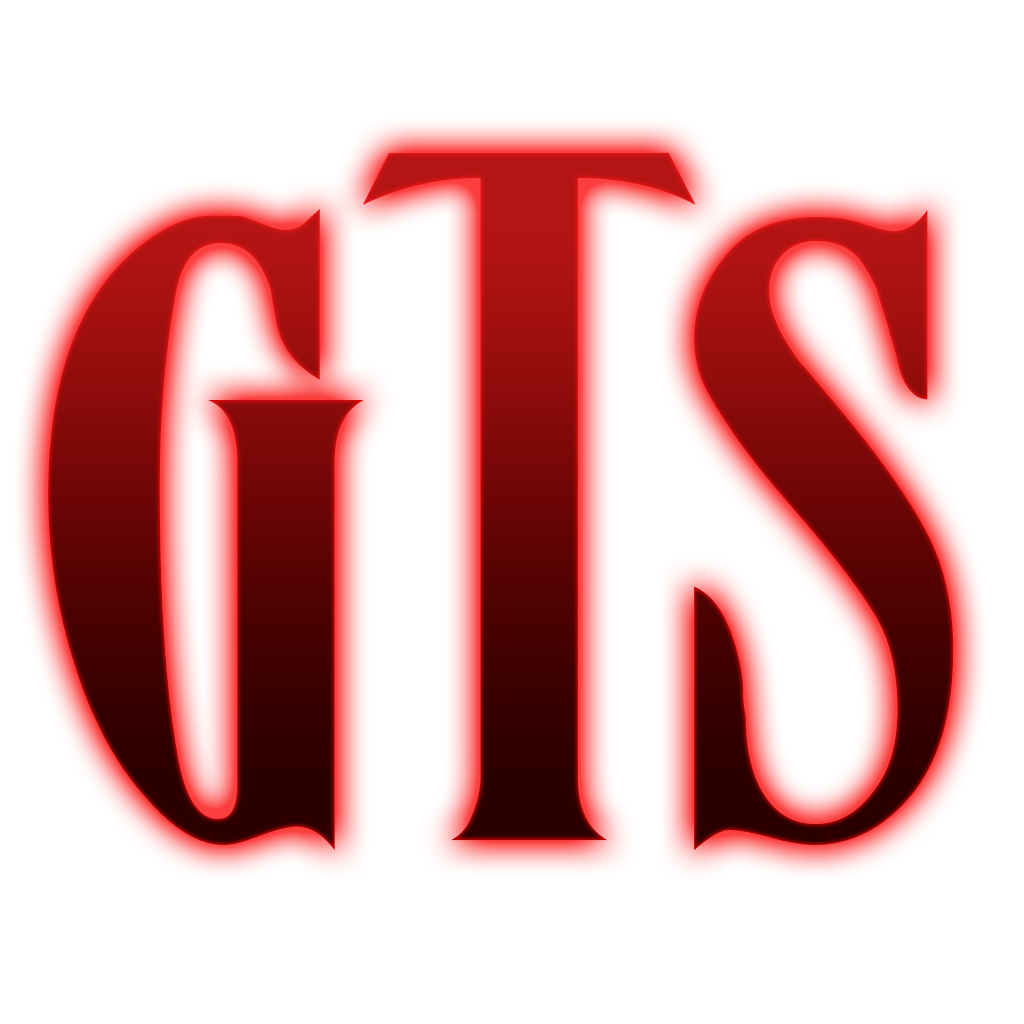
<style>
.page{position:relative;width:1024px;height:1024px;background:#ffffff}
.page>*{position:absolute;margin:0}
.t1{font:833.3px "Verve"}
</style>
<div class="page">
<p class="t1" style="left:48px;top:153px;width:906px;height:697px">GTs</p>
</div>
